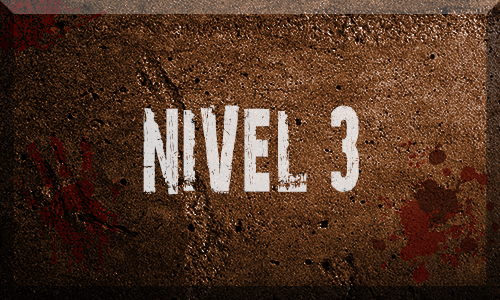
<style>
.page{position:relative;width:500px;height:300px}
.page>*{position:absolute;margin:0}
.t1{font:115.7px "28-Days-Later-Regular";letter-spacing:0.04em;color:#ddd7d4;scale:0.58 1}
</style>
<div class="page">
<p class="t1" style="left:143px;top:105px;width:216px;height:90px">NIVEL 3</p>
</div>
